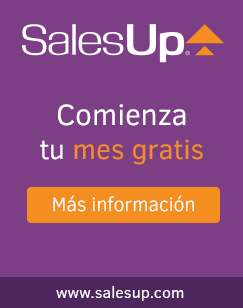
<style>
.page{position:relative;width:243px;height:308px;background:#7c3e84}
.page>*{position:absolute;margin:0}
.t1{font:28px "ClearSans";color:#f48e21}
.t2{font:30px "ClearSans";color:#ffffff}
.t3{font:28px "ClearSans";color:#ffffff}
.t4{font:16.1px "ClearSans";color:#ffffff}
</style>
<div class="page">
<p class="t1" style="left:40px;top:104px;width:163px;height:61px;text-align:center"><span class="t2">Comienza<br></span><span class="t3">tu</span> mes gratis</p>
<p class="t4" style="left:56px;top:286px;width:128px;height:15px">www.salesup.com</p>
</div>
